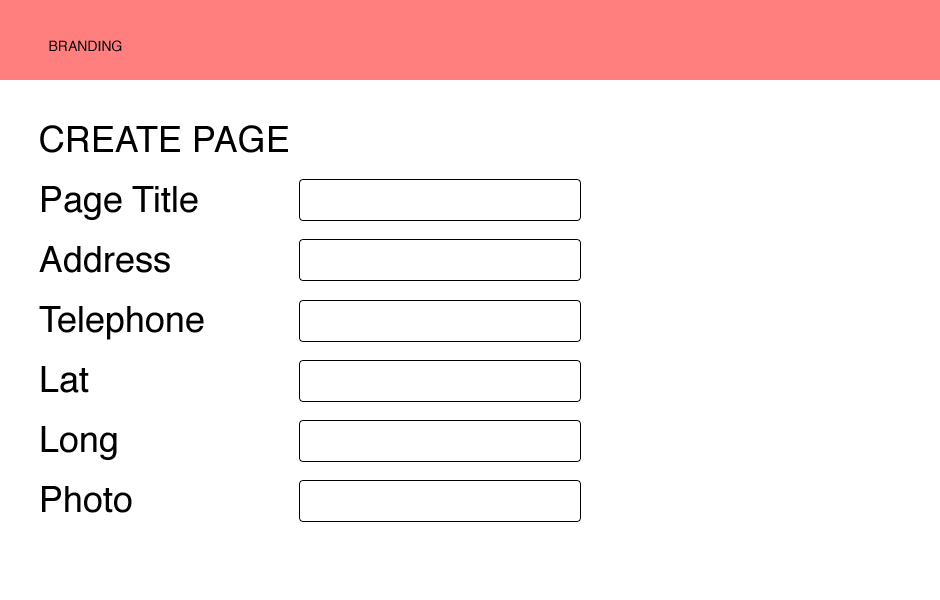
<style>
.page{position:relative;width:940px;height:600px;background:#ffffff}
.page>*{position:absolute;margin:0}
.t1{font:14px "Helvetica";color:#000000}
.t2{font:36px "Helvetica";color:#000000;text-transform:uppercase}
.t3{font:36px/60px "Helvetica";color:#000000}
</style>
<div class="page">
<p class="t1" style="left:49px;top:40px;width:73px;height:12px">BRANDING</p>
<p class="t2" style="left:40px;top:125px;width:248px;height:28px">Create Page</p>
<p class="t3" style="left:39px;top:186px;width:165px;height:327px">Page Title<br>Address<br>Telephone<br>Lat<br>Long<br>Photo</p>
</div>
